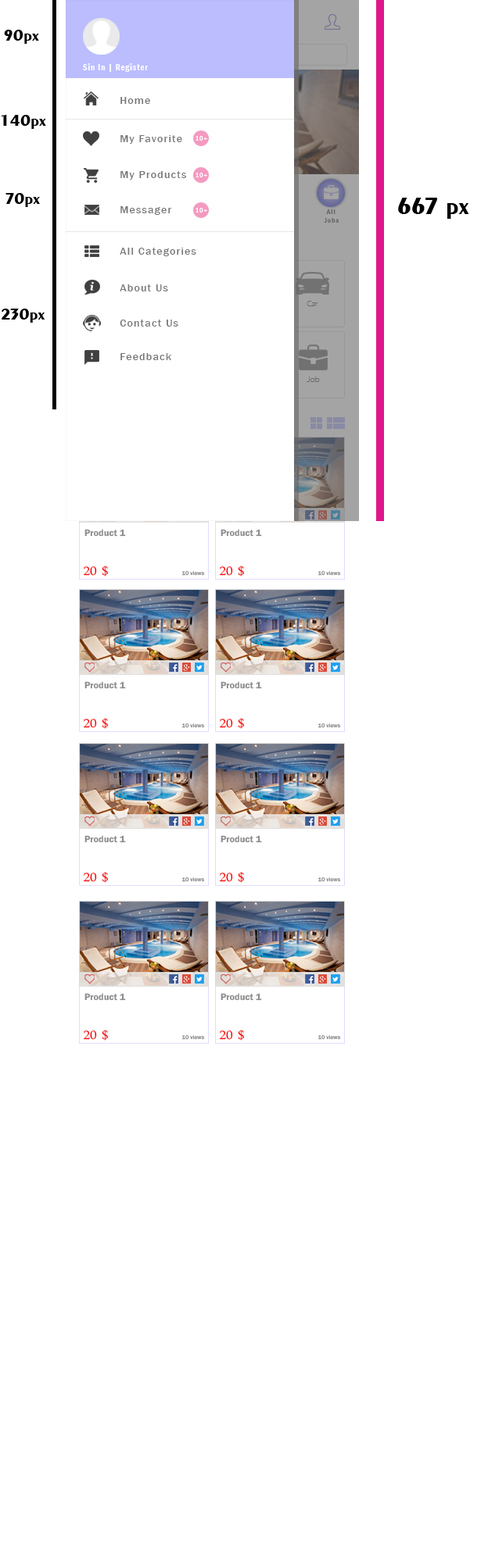
<style>
.page{position:relative;width:488px;height:1568px;background:#ffffff}
.page>*{position:absolute;margin:0}
.t1{font:16.5px "Exotic350BT-Bold";color:#000000}
.t2{font:8.3px "FranklinGothic-DemiCond";letter-spacing:0.1em;color:#ffffff}
.t3{font:10.6px "FranklinGothic-Medium";letter-spacing:0.1em;color:#787878}
.t4{font:7.1px "FranklinGothic-MediumCond";letter-spacing:0.1em;color:#ffffff}
.t5{font:24.8px "Exotic350BT-Bold";color:#000000}
.t6{font:7.1px "FranklinGothic-DemiCond";letter-spacing:0.1em;color:#656565}
.t7{font:7.7px "ErasITC-Light";color:#6d6d6d}
.t8{font:8.2px "ErasITC-Light";color:#6d6d6d}
.t9{font:9.6px "FranklinGothic-Demi";color:#8c8c8c}
.t10{font:20.3px "DaunPenh";color:#f90000}
.t11{font:5.9px "FranklinGothic-Medium";color:#8c8c8c}
</style>
<div class="page">
<p class="t1" style="left:4px;top:30px;width:35px;height:14px">90px</p>
<p class="t2" style="left:83px;top:63px;width:65px;height:9px">Sin In | Register</p>
<p class="t3" style="left:120px;top:97px;width:30px;height:7px">Home</p>
<p class="t1" style="left:1px;top:115px;width:45px;height:14px">140px</p>
<p class="t3" style="left:120px;top:135px;width:62px;height:9px">My Favorite</p>
<p class="t4" style="left:195px;top:136px;width:12px;height:5px">10+</p>
<p class="t3" style="left:120px;top:171px;width:66px;height:9px">My Products</p>
<p class="t4" style="left:195px;top:173px;width:12px;height:4px">10+</p>
<p class="t1" style="left:5px;top:193px;width:35px;height:14px">70px</p>
<p class="t5" style="left:398px;top:198px;width:71px;height:21px">667 px</p>
<p class="t3" style="left:120px;top:206px;width:52px;height:9px">Messager</p>
<p class="t4" style="left:195px;top:208px;width:12px;height:5px">10+</p>
<p class="t6" style="left:323px;top:209px;width:16px;height:14px;text-align:center">All <br>Jobs</p>
<p class="t3" style="left:120px;top:248px;width:76px;height:8px">All Categories</p>
<p class="t3" style="left:120px;top:284px;width:48px;height:7px">About Us</p>
<p class="t7" style="left:306px;top:301px;width:12px;height:5px">Car</p>
<p class="t1" style="left:2px;top:309px;width:43px;height:14px">230px</p>
<p class="t3" style="left:120px;top:320px;width:58px;height:7px">Contact Us</p>
<p class="t3" style="left:120px;top:353px;width:52px;height:7px">Feedback</p>
<p class="t8" style="left:306px;top:377px;width:14px;height:5px">Job</p>
<p class="t9" style="left:84px;top:529px;width:42px;height:8px">Product 1</p>
<p class="t9" style="left:220px;top:529px;width:42px;height:8px">Product 1</p>
<p class="t10" style="left:83px;top:566px;width:25px;height:11px">20 $</p>
<p class="t10" style="left:219px;top:566px;width:25px;height:11px">20 $</p>
<p class="t11" style="left:181px;top:570px;width:24px;height:6px">10 views</p>
<p class="t11" style="left:317px;top:570px;width:24px;height:6px">10 views</p>
<p class="t9" style="left:84px;top:681px;width:42px;height:8px">Product 1</p>
<p class="t9" style="left:220px;top:681px;width:42px;height:8px">Product 1</p>
<p class="t10" style="left:83px;top:718px;width:25px;height:11px">20 $</p>
<p class="t11" style="left:181px;top:723px;width:24px;height:5px">10 views</p>
<p class="t10" style="left:219px;top:718px;width:25px;height:11px">20 $</p>
<p class="t11" style="left:317px;top:723px;width:24px;height:5px">10 views</p>
<p class="t9" style="left:84px;top:835px;width:42px;height:8px">Product 1</p>
<p class="t9" style="left:220px;top:835px;width:42px;height:8px">Product 1</p>
<p class="t10" style="left:83px;top:872px;width:25px;height:11px">20 $</p>
<p class="t11" style="left:181px;top:877px;width:24px;height:5px">10 views</p>
<p class="t10" style="left:219px;top:872px;width:25px;height:11px">20 $</p>
<p class="t11" style="left:317px;top:877px;width:24px;height:5px">10 views</p>
<p class="t9" style="left:84px;top:993px;width:42px;height:8px">Product 1</p>
<p class="t9" style="left:220px;top:993px;width:42px;height:8px">Product 1</p>
<p class="t10" style="left:83px;top:1030px;width:25px;height:11px">20 $</p>
<p class="t11" style="left:181px;top:1034px;width:24px;height:6px">10 views</p>
<p class="t10" style="left:219px;top:1030px;width:25px;height:11px">20 $</p>
<p class="t11" style="left:317px;top:1034px;width:24px;height:6px">10 views</p>
</div>
